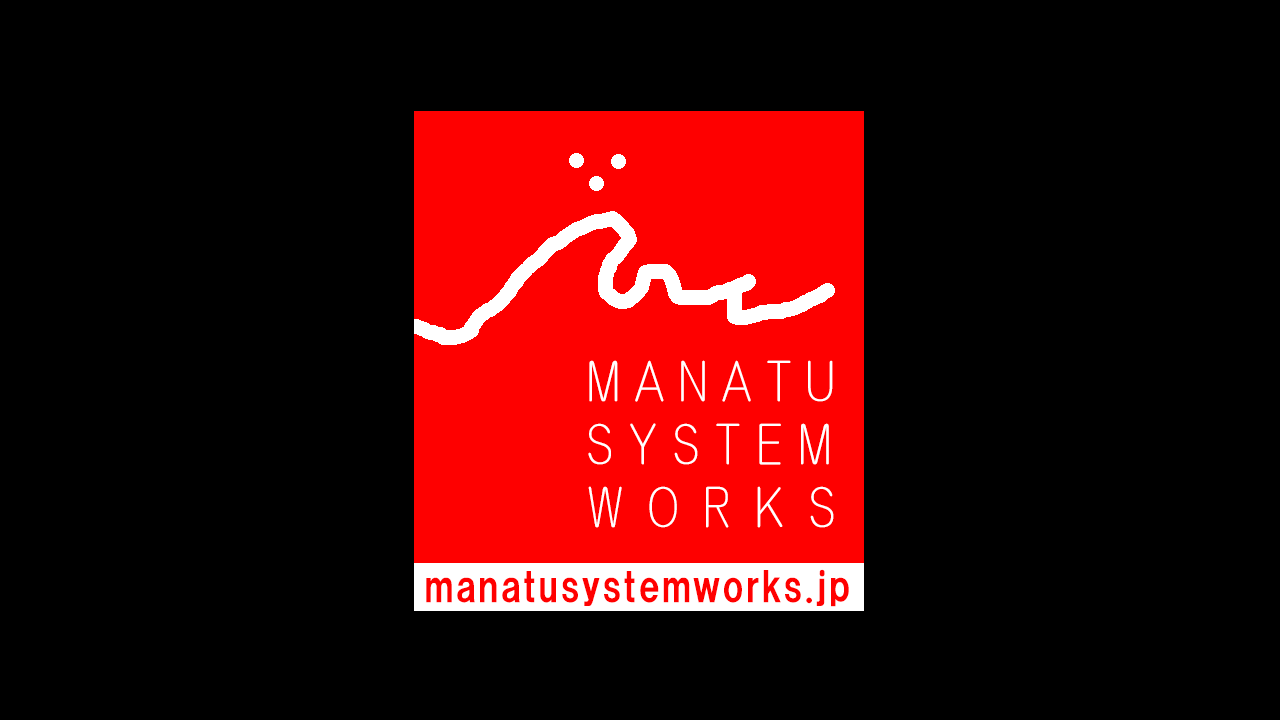
<style>
.page{position:relative;width:1280px;height:720px;background:#000000}
.page>*{position:absolute;margin:0}
.t1{font:60px "HGPKyokashotai";letter-spacing:0.21em;color:#ffffff}
.t2{font:60px "HGPKyokashotai";letter-spacing:0.25em;color:#ffffff}
.t3{font:60px "HGPKyokashotai";letter-spacing:0.4em;color:#ffffff}
.t4{font:40px "HGSSoeiKakugothicUB";letter-spacing:0.05em;color:#ff0000}
</style>
<div class="page">
<p class="t1" style="left:589px;top:360px;width:244px;height:42px">MANATU</p>
<p class="t2" style="left:588px;top:423px;width:241px;height:42px">SYSTEM</p>
<p class="t3" style="left:588px;top:486px;width:246px;height:42px">WORKS</p>
<p class="t4" style="left:426px;top:569px;width:423px;height:38px">manatusystemworks.jp</p>
</div>
